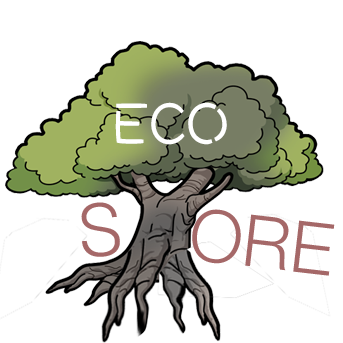
<style>
.page{position:relative;width:343px;height:343px;background:#ffffff}
.page>*{position:absolute;margin:0}
.t1{font:61.4px "DFWaWaSC-W5";color:#ffffff;scale:0.93 1}
.t2{font:72px "Helvetica-Light";color:#a56868}
.t3{font:72px "HelveticaNeue-Light";color:#a56868}
</style>
<div class="page">
<p class="t1" style="left:115px;top:102px;width:112px;height:43px">ECO</p>
<p class="t2" style="left:81px;top:202px;width:39px;height:55px;rotate:-4deg">S</p>
<p class="t3" style="left:192px;top:209px;width:143px;height:67px;rotate:7deg">ORE</p>
</div>
